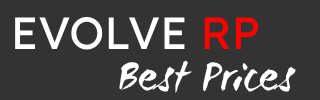
<style>
.page{position:relative;width:320px;height:100px;background:#333333}
.page>*{position:absolute;margin:0}
.t1{font:45px "ReadexPro-Regular";color:#ffffff}
.t2{font:45px "ReadexPro-Regular";color:#ff0000}
.t3{font:45px "WCManoNegraBta";color:#ffffff}
</style>
<div class="page">
<p class="t1" style="left:15px;top:17px;width:244px;height:33px">EVOLVE<span class="t2"> RP</span></p>
<p class="t3" style="left:119px;top:60px;width:177px;height:34px">Best Prices</p>
</div>
